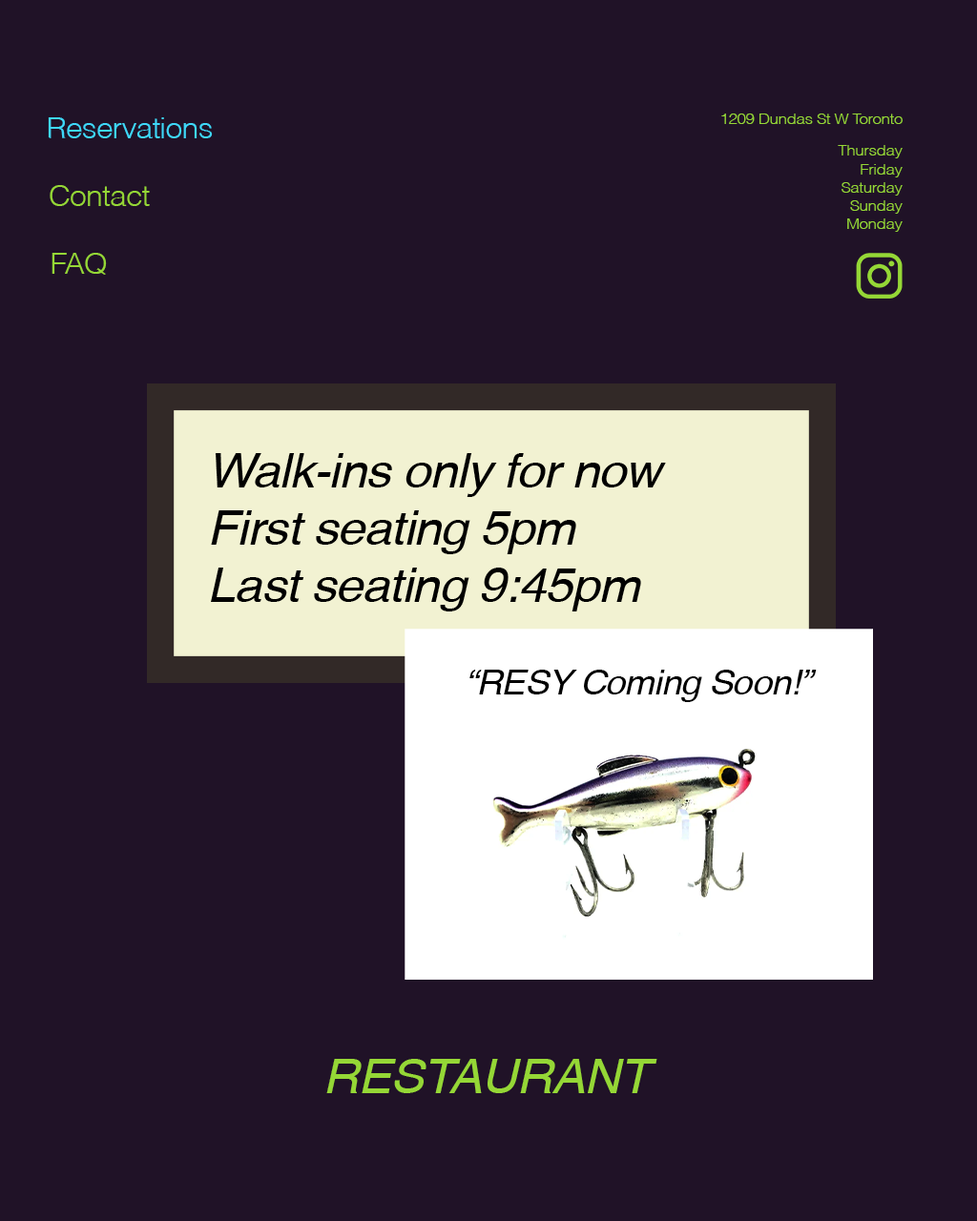
<style>
.page{position:relative;width:977px;height:1221px;background:#201227}
.page>*{position:absolute;margin:0}
.t1{font:15.3px "Helvetica-Light";letter-spacing:-0.02em;color:#95d736;scale:1.05 1}
.t2{font:28.6px "Helvetica-Light";letter-spacing:-0.02em;color:#3ed8f9;scale:1.05 1}
.t3{font:28.6px "Helvetica-Light";letter-spacing:-0.02em;color:#95d736;scale:1.05 1}
.t4{font:47.7px "Helvetica-Oblique";letter-spacing:-0.02em;color:#000000;scale:1.05 1}
.t5{font:34.3px "Helvetica-Oblique";letter-spacing:-0.02em;color:#000000;scale:1.05 1}
.t6{font:47.7px "Helvetica-Oblique";letter-spacing:-0.02em;color:#95d736;scale:1.05 1}
</style>
<div class="page">
<p class="t1" style="left:721px;top:114px;width:181px;height:10px">1209 Dundas St W Toronto</p>
<p class="t2" style="left:48px;top:117px;width:165px;height:21px">Reservations</p>
<p class="t1" style="left:837px;top:145px;width:65px;height:87px;text-align:right">Thursday<br>Friday<br>Saturday<br>Sunday<br>Monday</p>
<p class="t3" style="left:50px;top:185px;width:100px;height:21px">Contact</p>
<p class="t3" style="left:52px;top:253px;width:55px;height:22px">FAQ</p>
<p class="t4" style="left:211px;top:453px;width:455px;height:158px">Walk-ins only for now<br>First seating 5pm<br>Last seating 9:45pm</p>
<p class="t5" style="left:469px;top:670px;width:347px;height:32px">“RESY Coming Soon!”</p>
<p class="t6" style="left:326px;top:1059px;width:331px;height:34px">RESTAURANT</p>
</div>
